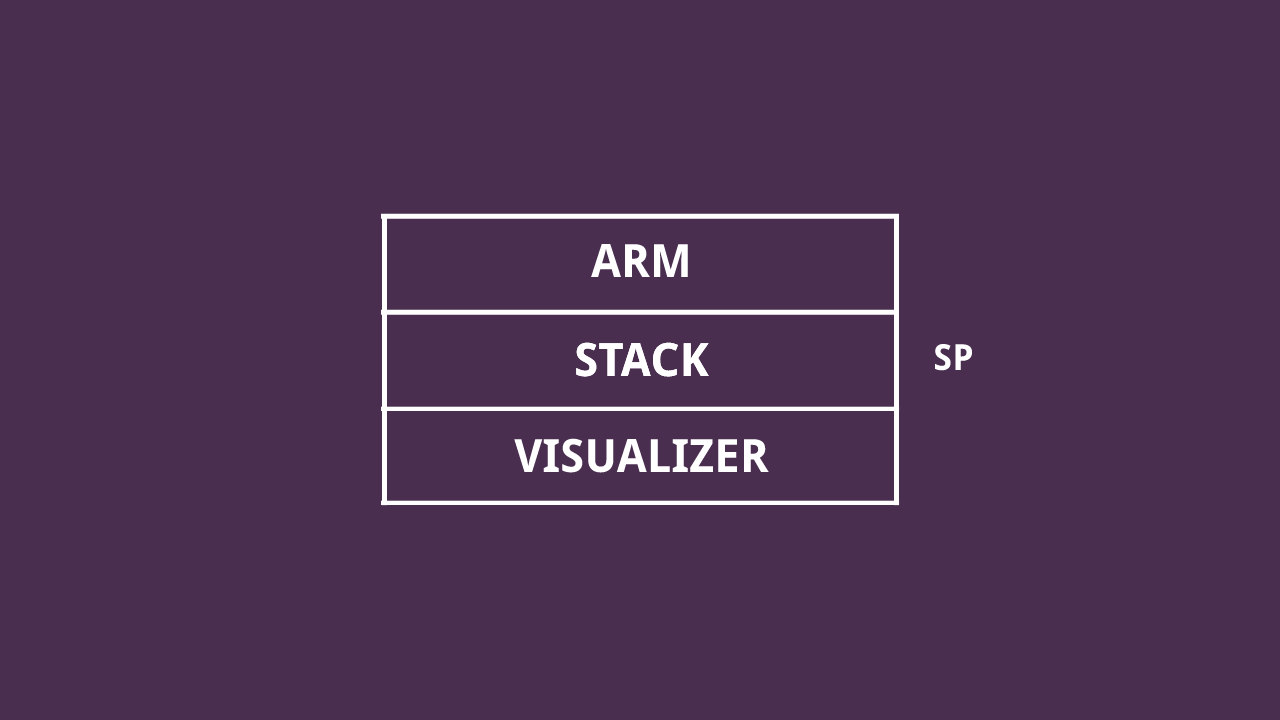
<style>
.page{position:relative;width:1280px;height:720px;background:#492e50}
.page>*{position:absolute;margin:0}
.t1{font:46px "DroidSans-Bold";color:#ffffff}
.t2{font:36px "DroidSans-Bold";color:#ffffff}
</style>
<div class="page">
<p class="t1" style="left:591px;top:244px;width:97px;height:33px">ARM</p>
<p class="t1" style="left:576px;top:342px;width:133px;height:35px">STACK</p>
<p class="t1" style="left:576px;top:342px;width:133px;height:35px">STACK</p>
<p class="t2" style="left:934px;top:343px;width:39px;height:28px">SP</p>
<p class="t1" style="left:514px;top:438px;width:255px;height:35px">VISUALIZER</p>
</div>
